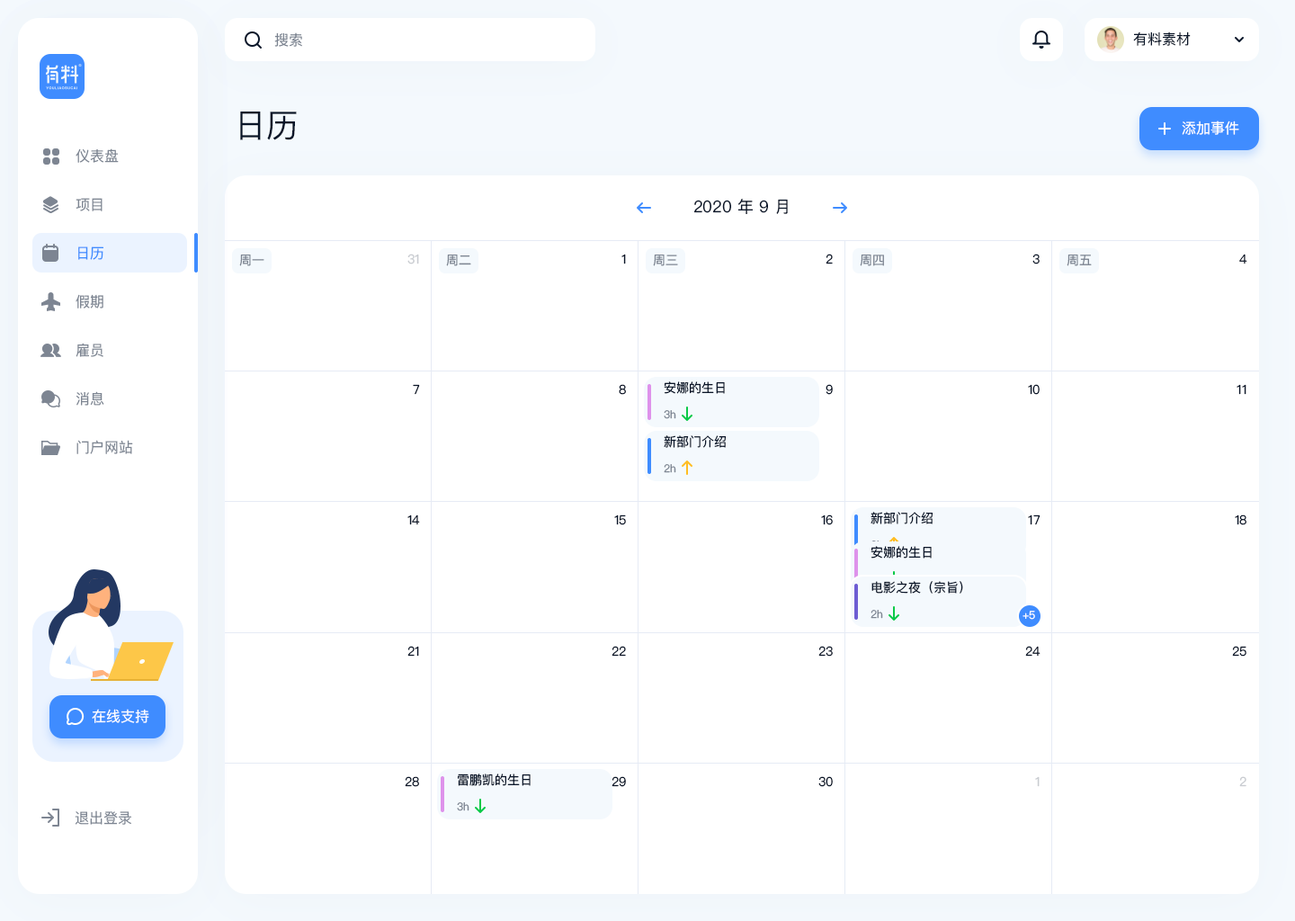
<style>
.page{position:relative;width:1295px;height:921px;background:#ffffff}
.page>*{position:absolute;margin:0}
.t1{font:14.4px "PingFangSC-Regular";color:#7d8592}
.t2{font:14.4px "PingFangSC-Regular";color:#0a1629}
.t3{font:32.4px "PingFangSC-Regular";color:#0a1629}
.t4{font:14.4px "PingFangSC-Regular";color:#ffffff}
.t5{font:14.4px "PingFangSC-Regular"}
.t6{font:16.2px "PingFangSC-Regular";color:#0a1629}
.t7{font:14.4px "PingFangSC-Regular";color:#3f8cff}
.t8{font:12.6px "PingFangSC-Regular";color:#7d8592}
.t9{font:12.6px "PingFangSC-Regular";color:#c9ccd1}
.t10{font:12.6px "PingFangSC-Regular";color:#0a1629}
.t11{font:10.8px "PingFangSC-Regular";color:#7d8592}
.t12{font:10.8px "PingFangSC-Regular";color:#ffffff}
</style>
<div class="page">
<p class="t1" style="left:274px;top:32px;width:28px;height:15px">搜索</p>
<p class="t2" style="left:1133px;top:31px;width:58px;height:15px">有料素材</p>
<p class="t3" style="left:240px;top:112px;width:57px;height:28px">日历</p>
<p class="t4" style="left:1182px;top:121px;width:57px;height:14px">添加事件</p>
<p class="t5" style="left:76px;top:147px;width:43px;height:15px">仪表盘</p>
<p class="t1" style="left:76px;top:148px;width:43px;height:15px">仪表盘</p>
<p class="t1" style="left:76px;top:197px;width:27px;height:13px">项目</p>
<p class="t1" style="left:76px;top:198px;width:27px;height:13px">项目</p>
<p class="t6" style="left:694px;top:199px;width:94px;height:15px">2020 年 9 月</p>
<p class="t5" style="left:78px;top:245px;width:25px;height:14px">日历</p>
<p class="t7" style="left:78px;top:246px;width:25px;height:14px">日历</p>
<p class="t8" style="left:239px;top:254px;width:25px;height:12px">周一</p>
<p class="t9" style="left:407px;top:254px;width:12px;height:10px">31</p>
<p class="t8" style="left:446px;top:254px;width:25px;height:12px">周二</p>
<p class="t10" style="left:621px;top:254px;width:5px;height:10px">1</p>
<p class="t8" style="left:653px;top:254px;width:25px;height:12px">周三</p>
<p class="t10" style="left:826px;top:254px;width:7px;height:10px">2</p>
<p class="t8" style="left:860px;top:254px;width:24px;height:12px">周四</p>
<p class="t10" style="left:1032px;top:254px;width:8px;height:10px">3</p>
<p class="t8" style="left:1067px;top:254px;width:25px;height:12px">周五</p>
<p class="t10" style="left:1239px;top:254px;width:8px;height:10px">4</p>
<p class="t5" style="left:76px;top:293px;width:27px;height:15px">假期</p>
<p class="t1" style="left:76px;top:294px;width:27px;height:14px">假期</p>
<p class="t5" style="left:76px;top:342px;width:27px;height:14px">雇员</p>
<p class="t1" style="left:76px;top:343px;width:27px;height:14px">雇员</p>
<p class="t10" style="left:413px;top:384px;width:7px;height:11px">7</p>
<p class="t10" style="left:619px;top:384px;width:7px;height:11px">8</p>
<p class="t10" style="left:664px;top:381px;width:61px;height:13px">安娜的生日</p>
<p class="t10" style="left:826px;top:384px;width:7px;height:11px">9</p>
<p class="t10" style="left:1028px;top:384px;width:12px;height:11px">10</p>
<p class="t10" style="left:1236px;top:384px;width:10px;height:11px">11</p>
<p class="t1" style="left:76px;top:391px;width:28px;height:15px">消息</p>
<p class="t11" style="left:664px;top:410px;width:12px;height:9px">3h</p>
<p class="t10" style="left:664px;top:435px;width:62px;height:13px">新部门介绍</p>
<p class="t1" style="left:76px;top:440px;width:57px;height:14px">门户网站</p>
<p class="t11" style="left:664px;top:464px;width:12px;height:9px">2h</p>
<p class="t10" style="left:407px;top:514px;width:13px;height:11px">14</p>
<p class="t10" style="left:614px;top:514px;width:12px;height:11px">15</p>
<p class="t10" style="left:821px;top:514px;width:12px;height:11px">16</p>
<p class="t10" style="left:870px;top:512px;width:63px;height:12px">新部门介绍</p>
<p class="t10" style="left:1028px;top:514px;width:12px;height:11px">17</p>
<p class="t10" style="left:1235px;top:514px;width:11px;height:11px">18</p>
<p class="t10" style="left:870px;top:546px;width:62px;height:12px">安娜的生日</p>
<p class="t10" style="left:871px;top:581px;width:92px;height:13px">电影之夜（宗旨）</p>
<p class="t11" style="left:870px;top:610px;width:13px;height:9px">2h</p>
<p class="t12" style="left:1022px;top:611px;width:13px;height:9px">+5</p>
<p class="t10" style="left:407px;top:646px;width:12px;height:10px">21</p>
<p class="t10" style="left:611px;top:646px;width:15px;height:10px">22</p>
<p class="t10" style="left:818px;top:646px;width:15px;height:10px">23</p>
<p class="t10" style="left:1025px;top:646px;width:15px;height:10px">24</p>
<p class="t10" style="left:1232px;top:646px;width:14px;height:10px">25</p>
<p class="t4" style="left:92px;top:709px;width:57px;height:14px">在线支持</p>
<p class="t10" style="left:458px;top:773px;width:73px;height:13px">雷鹏凯的生日</p>
<p class="t10" style="left:405px;top:776px;width:14px;height:11px">28</p>
<p class="t10" style="left:611px;top:776px;width:15px;height:11px">29</p>
<p class="t10" style="left:818px;top:776px;width:15px;height:11px">30</p>
<p class="t9" style="left:1035px;top:776px;width:5px;height:11px">1</p>
<p class="t9" style="left:1239px;top:776px;width:7px;height:11px">2</p>
<p class="t11" style="left:457px;top:802px;width:12px;height:9px">3h</p>
<p class="t1" style="left:75px;top:810px;width:56px;height:15px">退出登录</p>
</div>
